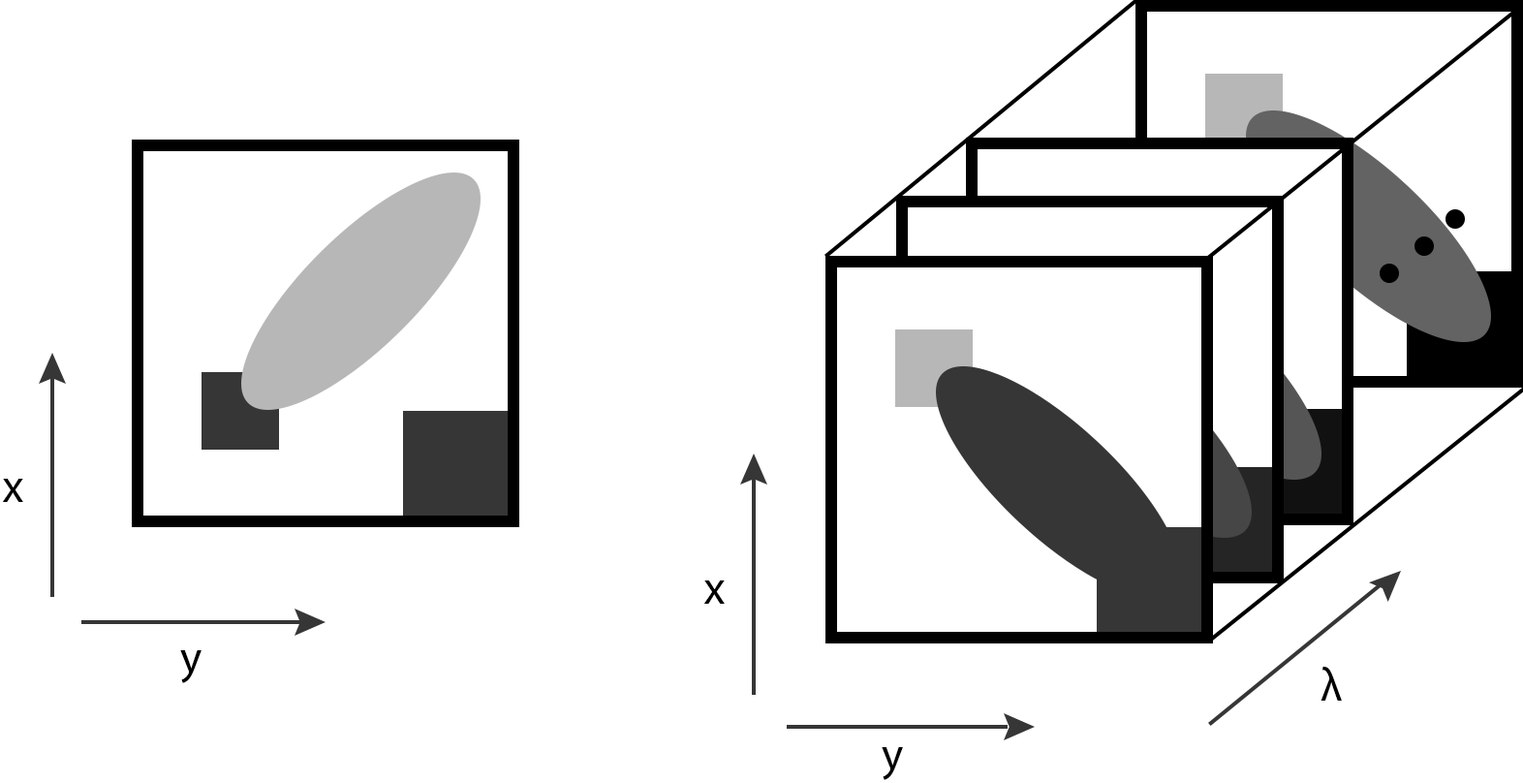
<style>
.page{position:relative;width:1523px;height:783px;background:#ffffff}
.page>*{position:absolute;margin:0}
.t1{font:46.5px "MyriadPro-Regular";color:#000000}
</style>
<div class="page">
<p class="t1" style="left:2px;top:479px;width:21px;height:23px">x</p>
<p class="t1" style="left:703px;top:580px;width:22px;height:24px">x</p>
<p class="t1" style="left:180px;top:650px;width:22px;height:33px">y</p>
<p class="t1" style="left:1321px;top:667px;width:21px;height:34px">λ</p>
<p class="t1" style="left:882px;top:747px;width:21px;height:33px">y</p>
</div>
